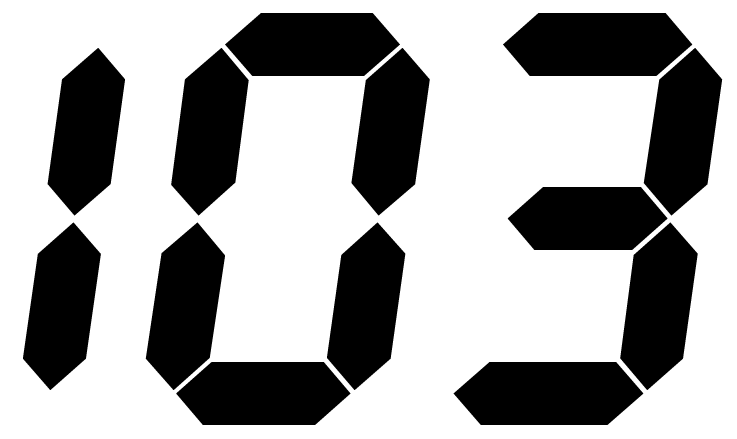
<style>
.page{position:relative;width:737px;height:439px;background:#ffffff}
.page>*{position:absolute;margin:0}
.t1{font:515px "MouseLEDU";letter-spacing:0.05em;color:#000000}
</style>
<div class="page">
<p class="t1" style="left:23px;top:13px;width:700px;height:412px">103</p>
</div>
